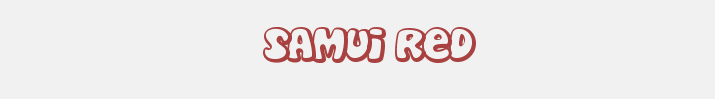
<style>
.page{position:relative;width:715px;height:99px;background:#f1f1f1}
.page>*{position:absolute;margin:0}
.t1{font:48px "Disko";color:#aa4141}
</style>
<div class="page">
<p class="t1" style="left:263px;top:27px;width:213px;height:36px">Samui red</p>
</div>
